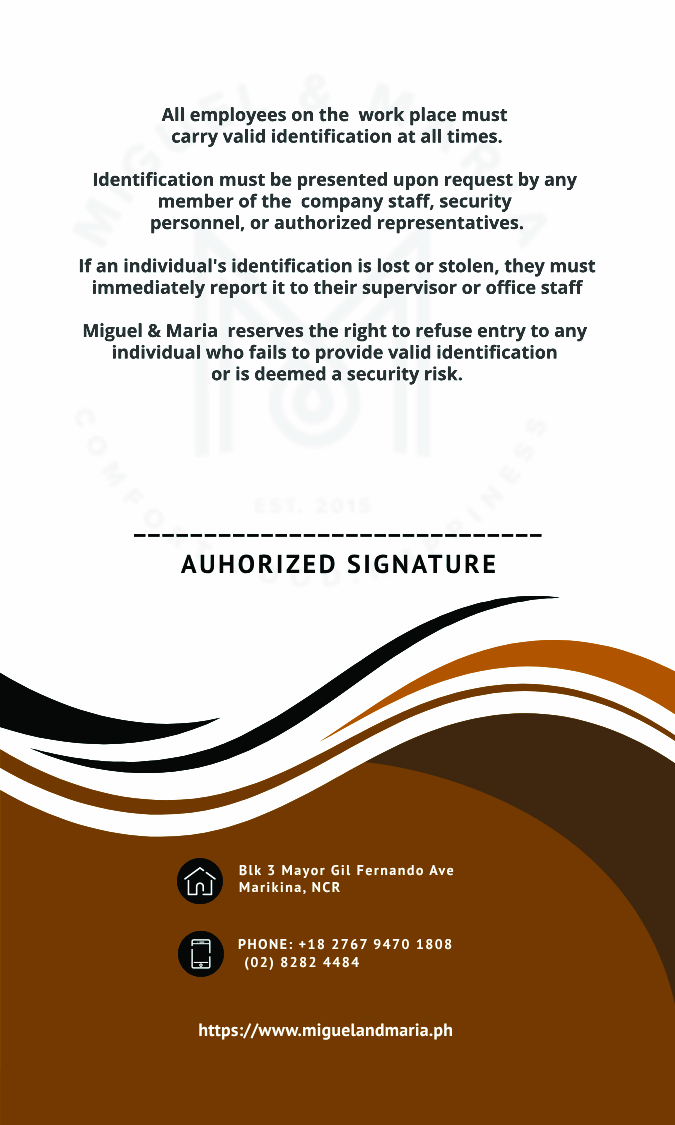
<style>
.page{position:relative;width:675px;height:1125px;background:#fefefe}
.page>*{position:absolute;margin:0}
.t1{font:18px "OpenSans-Bold";color:#3c3c3c}
.t2{font:26px "MyriadPro-Semibold";letter-spacing:0.1em;color:#000000}
.t3{font:14.1px "MyriadPro-Semibold";letter-spacing:0.1em;color:#ffffff}
.t4{font:14.1px "MyriadPro-Semibold";color:#ffffff}
.t5{font:17.8px "MyriadPro-Bold";letter-spacing:0.01em;color:#fefefe}
</style>
<div class="page">
<p class="t1" style="left:79px;top:107px;width:517px;height:278px;text-align:center">All employees on the  work place must <br>carry valid identification at all times.<br><br>Identification must be presented upon request by any <br>member of the  company staff, security <br>personnel, or authorized representatives.<br><br>If an individual's identification is lost or stolen, they must<br>immediately report it to their supervisor or office staff<br><br>Miguel &amp; Maria  reserves the right to refuse entry to any <br>individual who fails to provide valid identification <br>or is deemed a security risk.</p>
<p class="t2" style="left:134px;top:534px;width:408px;height:3px">_____________________________</p>
<p class="t2" style="left:180px;top:554px;width:315px;height:20px">AUHORIZED SIGNATURE</p>
<p class="t3" style="left:239px;top:864px;width:215px;height:14px">Blk 3 Mayor Gil Fernando Ave</p>
<p class="t3" style="left:239px;top:881px;width:101px;height:14px"><span class="t4">                     <br></span>Marikina, NCR</p>
<p class="t3" style="left:238px;top:938px;width:214px;height:12px">PHONE: +18 2767 9470 1808</p>
<p class="t3" style="left:245px;top:956px;width:114px;height:15px">(02) 8282 4484</p>
<p class="t5" style="left:199px;top:1023px;width:254px;height:17px">https://www.miguelandmaria.ph</p>
</div>
